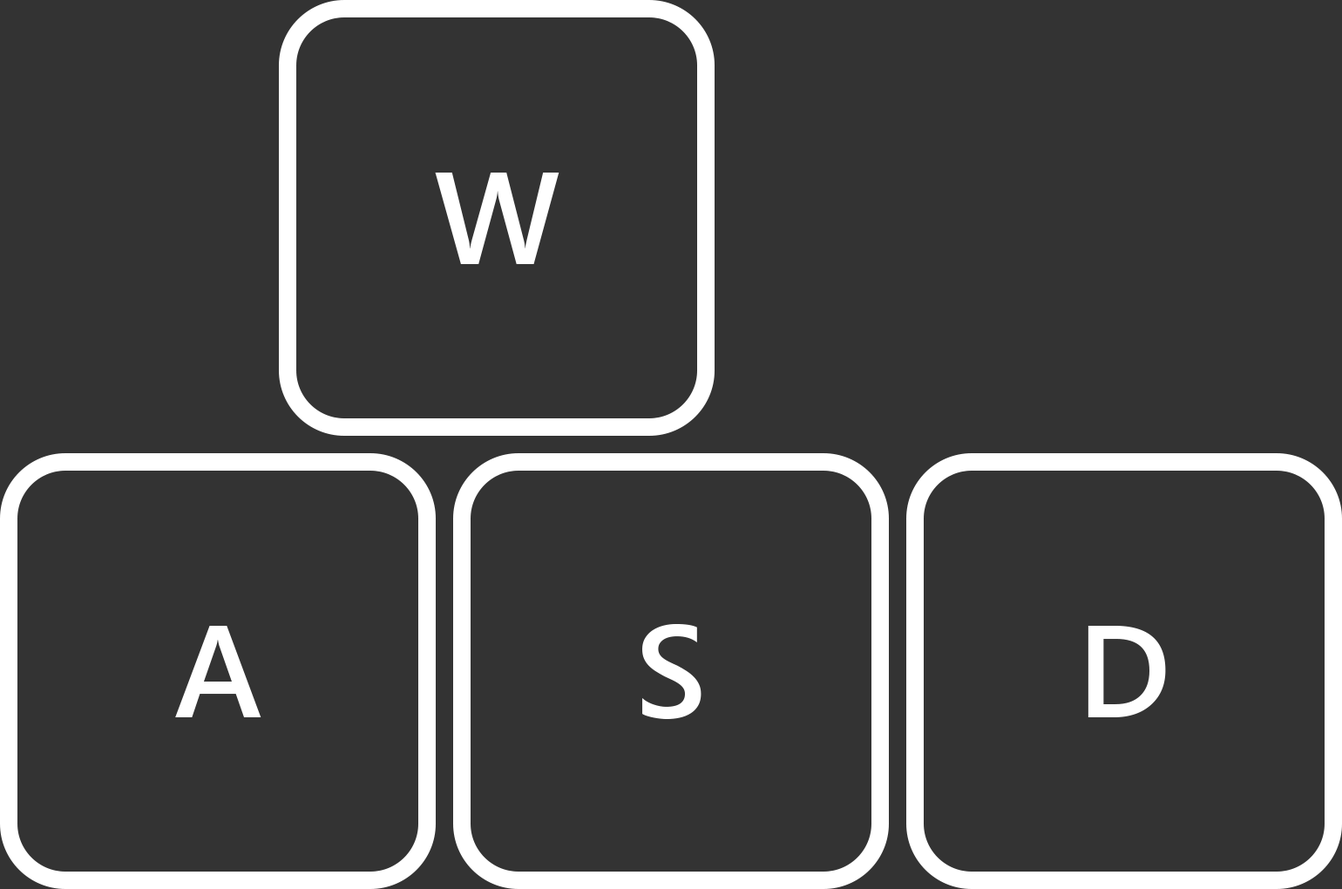
<style>
.page{position:relative;width:1342px;height:889px;background:#333333}
.page>*{position:absolute;margin:0}
.t1{font:130.7px "SegoeUI-Semibold";color:#ffffff}
</style>
<div class="page">
<p class="t1" style="left:435px;top:173px;width:124px;height:91px">W</p>
<p class="t1" style="left:175px;top:626px;width:86px;height:91px">A</p>
<p class="t1" style="left:642px;top:624px;width:59px;height:95px">S</p>
<p class="t1" style="left:1087px;top:626px;width:79px;height:91px">D</p>
</div>
